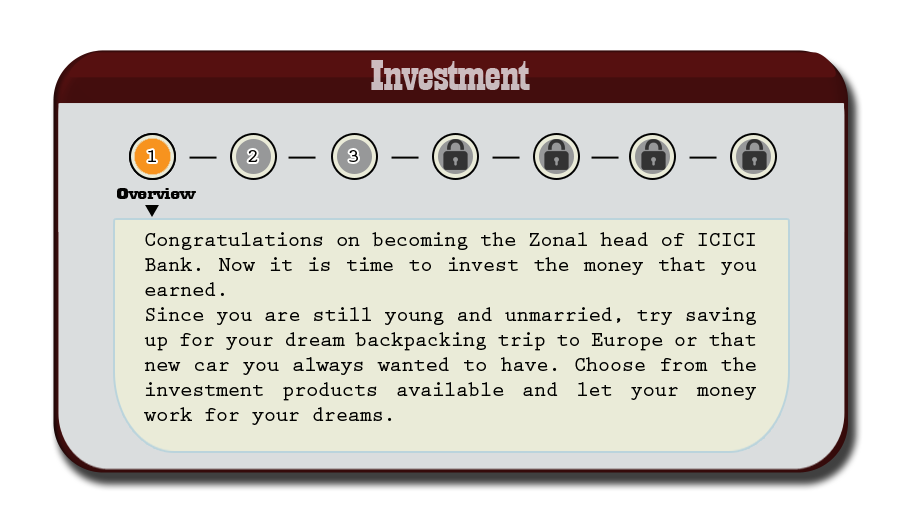
<style>
.page{position:relative;width:910px;height:512px;background:#eaebd8}
.page>*{position:absolute;margin:0}
.t1{font:44.6px "Playbill";letter-spacing:-0.025em;color:#c8bbbe;scale:1.61 1}
.t2{font:18.8px "PrestigeEliteStd-Bd";letter-spacing:-0.025em;color:#020201;scale:1.18 1}
.t3{font:17.3px "Playbill";letter-spacing:-0.025em;color:#020201;scale:2.47 1}
.t4{font:20.8px "PrestigeEliteStd-Bd";letter-spacing:-0.025em;color:#020201}
</style>
<div class="page">
<p class="t1" style="left:371px;top:60px;width:159px;height:30px">Investment</p>
<p class="t2" style="left:148px;top:150px;width:8px;height:12px">1</p>
<p class="t2" style="left:248px;top:150px;width:10px;height:12px">2</p>
<p class="t2" style="left:349px;top:150px;width:9px;height:12px">3</p>
<p class="t3" style="left:117px;top:188px;width:79px;height:11px">Overview</p>
<p class="t4" style="left:144px;top:232px;width:613px;height:193px;text-align:justify">Congratulations on becoming the Zonal head of ICICI Bank. Now it is time to invest the money that you earned. <br>Since you are still young and unmarried, try saving up for your dream backpacking trip to Europe or that new car you always wanted to have. Choose from the investment products available and let your money work for your dreams.</p>
</div>
